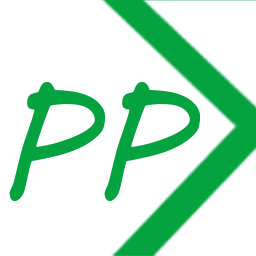
<style>
.page{position:relative;width:256px;height:256px;background:#ffffff}
.page>*{position:absolute;margin:0}
.t1{font:144px "MVBoli";color:#04a340}
</style>
<div class="page">
<p class="t1" style="left:9px;top:82px;width:191px;height:119px">PP</p>
</div>
